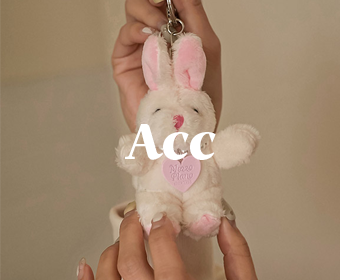
<style>
.page{position:relative;width:340px;height:280px}
.page>*{position:absolute;margin:0}
.t1{font:50px "ghanachoco";letter-spacing:-0.025em;color:#ffffff}
</style>
<div class="page">
<p class="t1" style="left:125px;top:124px;width:91px;height:36px">Acc</p>
</div>
